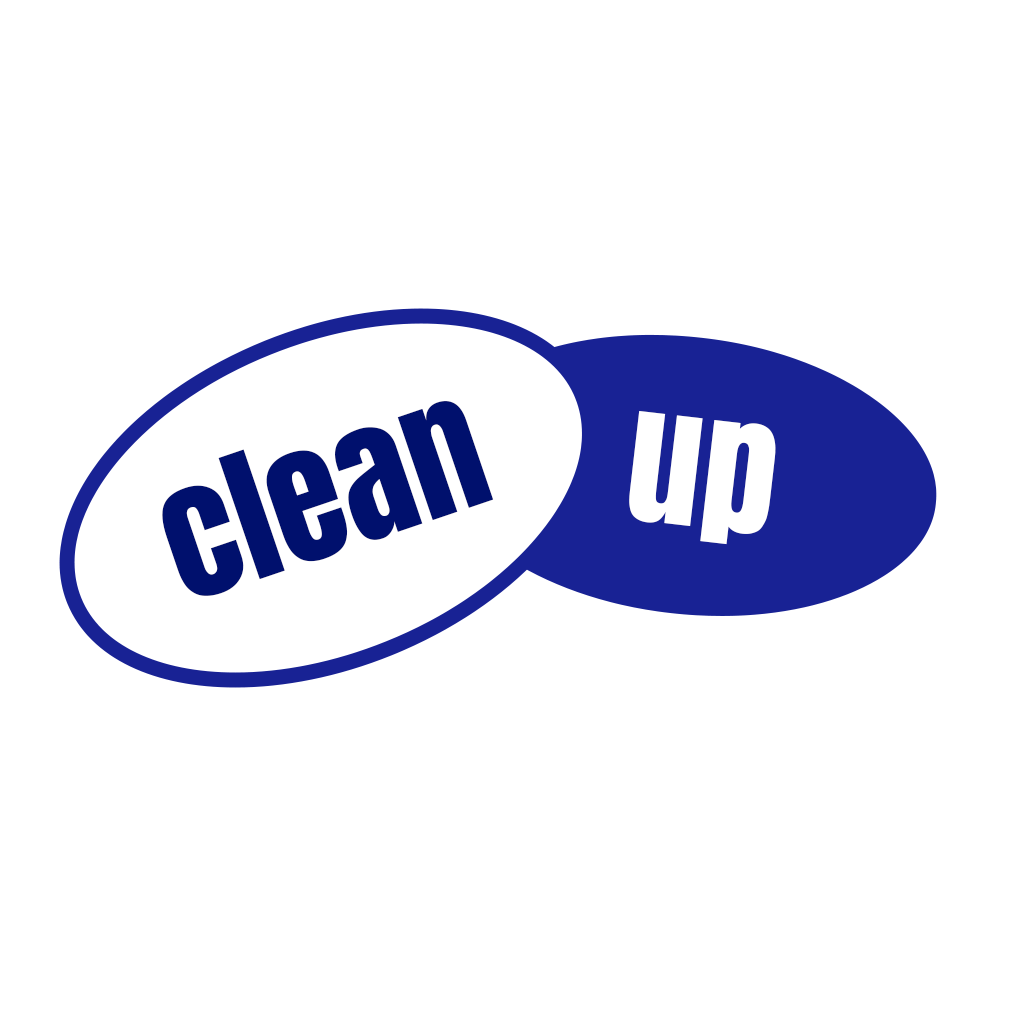
<style>
.page{position:relative;width:1024px;height:1024px;background:#ffffff}
.page>*{position:absolute;margin:0}
.t1{font:148px "Anton";color:#00106d}
.t2{font:148px "Anton";color:#ffffff}
</style>
<div class="page">
<p class="t1" style="left:162px;top:401px;width:332px;height:195px;rotate:-19deg">clean</p>
<p class="t2" style="left:629px;top:411px;width:147px;height:134px;rotate:7deg">up</p>
</div>
